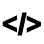
<style>
.page{position:relative;width:44px;height:44px;background:#ffffff}
.page>*{position:absolute;margin:0}
.t1{font:30px "Braggadocio";letter-spacing:-0.05em;color:#000000;scale:0.9 1}
</style>
<div class="page">
<p class="t1" style="left:2px;top:12px;width:39px;height:24px">&lt;/&gt;</p>
</div>
